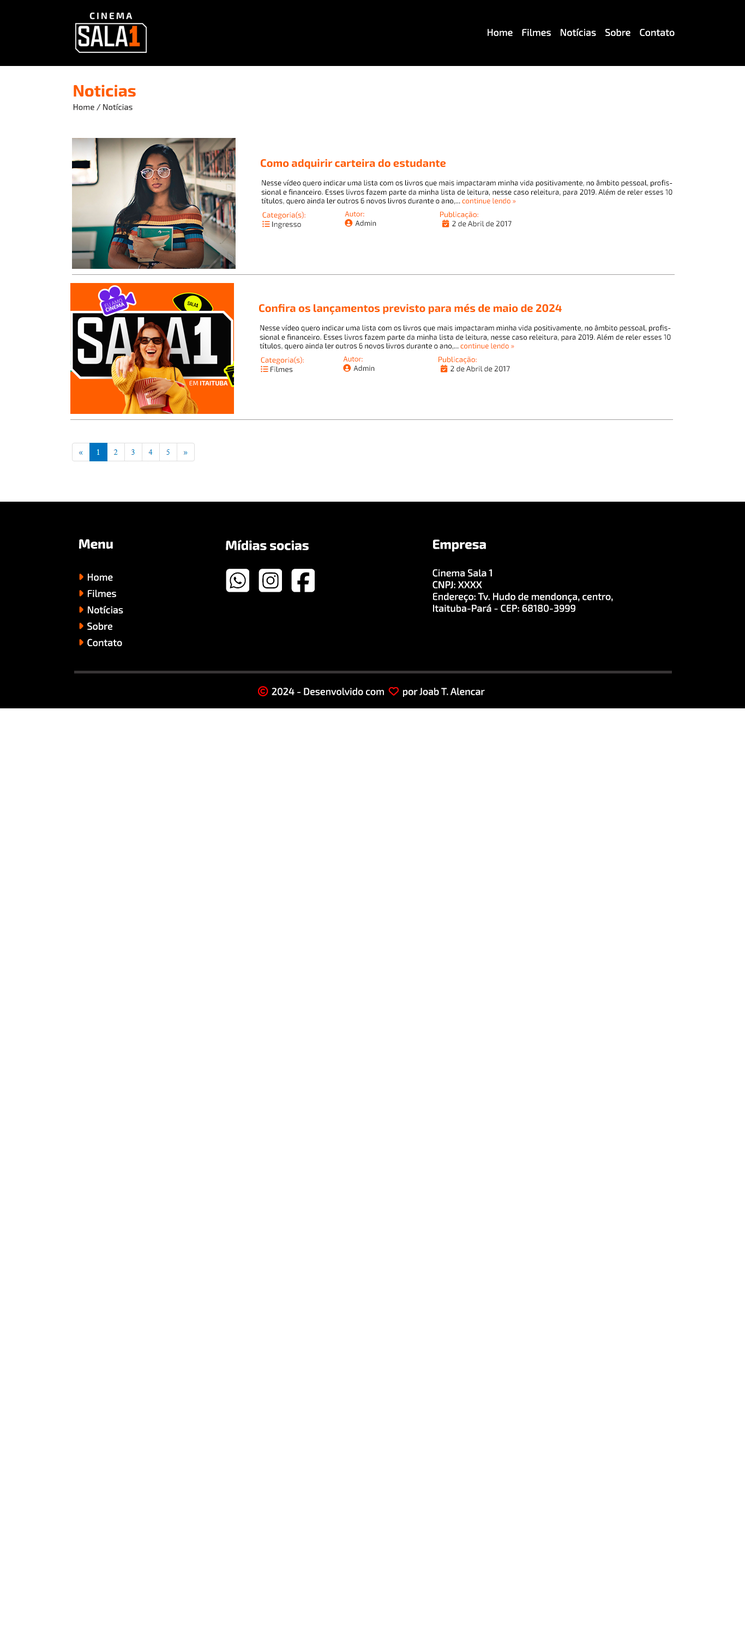
<style>
.page{position:relative;width:745px;height:1649px;background:#ffffff}
.page>*{position:absolute;margin:0}
.t1{font:9.8px "Exo2-Regular";color:#ffffff}
.t2{font:16.4px "Exo2-Bold";color:#ff5e00}
.t3{font:8.2px "Exo2-Regular";color:#333232}
.t4{font:10.9px "Exo2-Bold";color:#ff5e00}
.t5{font:7.6px "Exo2-Regular";color:#000000;scale:0.95 1}
.t6{font:7.6px "Exo2-Regular";color:#ff5e00;scale:0.95 1}
.t7{font:7.6px "Exo2-Regular";color:#ff5e00}
.t8{font:7.6px "FontAwesome6Free-Solid";color:#ff5e00}
.t9{font:7.6px "Exo2-Regular";color:#2c2c2c}
.t10{font:13.1px "Exo2-Bold";color:#ffffff}
.t11{font:9.8px "FontAwesome6Free-Regular";color:#ff0000}
.t12{font:9.8px "FontAwesome6Free-Regular";color:#f40a0a}
</style>
<div class="page">
<p class="t1" style="left:488px;top:28px;width:187px;height:8px">Home    Filmes    Notícias    Sobre    Contato</p>
<p class="t2" style="left:74px;top:85px;width:62px;height:12px">Noticias</p>
<p class="t3" style="left:73px;top:104px;width:60px;height:7px">Home / Notícias</p>
<p class="t4" style="left:261px;top:159px;width:185px;height:10px">Como adquirir carteira do estudante</p>
<p class="t5" style="left:261px;top:179px;width:412px;height:26px;text-align:justify">Nesse vídeo quero indicar uma lista com os livros que mais impactaram minha vida positivamente, no âmbito pessoal, profissional e financeiro. Esses livros fazem parte da minha lista de leitura, nesse caso releitura, para 2019. Além de reler esses 10 títulos, quero ainda ler outros 6 novos livros durante o ano,... <span class="t6">continue lendo »</span></p>
<p class="t7" style="left:262px;top:212px;width:43px;height:17px;text-align:justify">Categoria(s):<br><span class="t8">list-ul</span><span class="t9"> Ingresso</span></p>
<p class="t9" style="left:440px;top:212px;width:72px;height:15px;text-align:justify"><span class="t7">Publicação:<br> </span><span class="t8">calendar-check </span>2 de Abril de 2017</p>
<p class="t4" style="left:259px;top:303px;width:303px;height:12px">Confira os lançamentos previsto para més de maio de 2024</p>
<p class="t5" style="left:260px;top:325px;width:411px;height:25px;text-align:justify">Nesse vídeo quero indicar uma lista com os livros que mais impactaram minha vida positivamente, no âmbito pessoal, profissional e financeiro. Esses livros fazem parte da minha lista de leitura, nesse caso releitura, para 2019. Além de reler esses 10 títulos, quero ainda ler outros 6 novos livros durante o ano,... <span class="t6">continue lendo »</span></p>
<p class="t7" style="left:261px;top:357px;width:43px;height:16px;text-align:justify">Categoria(s):<br><span class="t8">list-ul</span><span class="t9"> Filmes</span></p>
<p class="t9" style="left:439px;top:357px;width:71px;height:16px;text-align:justify"><span class="t7">Publicação:<br> </span><span class="t8">calendar-check </span>2 de Abril de 2017</p>
<p class="t10" style="left:226px;top:540px;width:83px;height:10px">Mídias socias</p>
<p class="t1" style="left:433px;top:539px;width:180px;height:73px"><span class="t10">Empresa<br><br></span>Cinema Sala 1<br>CNPJ: XXXX<br>Endereço: Tv. Hudo de mendonça, centro, Itaituba-Pará - CEP: 68180-3999</p>
<p class="t1" style="left:258px;top:686px;width:227px;height:11px"><span class="t11">copyright </span>2024 - Desenvolvido com  <span class="t12">heart </span>por Joab T. Alencar</p>
</div>
